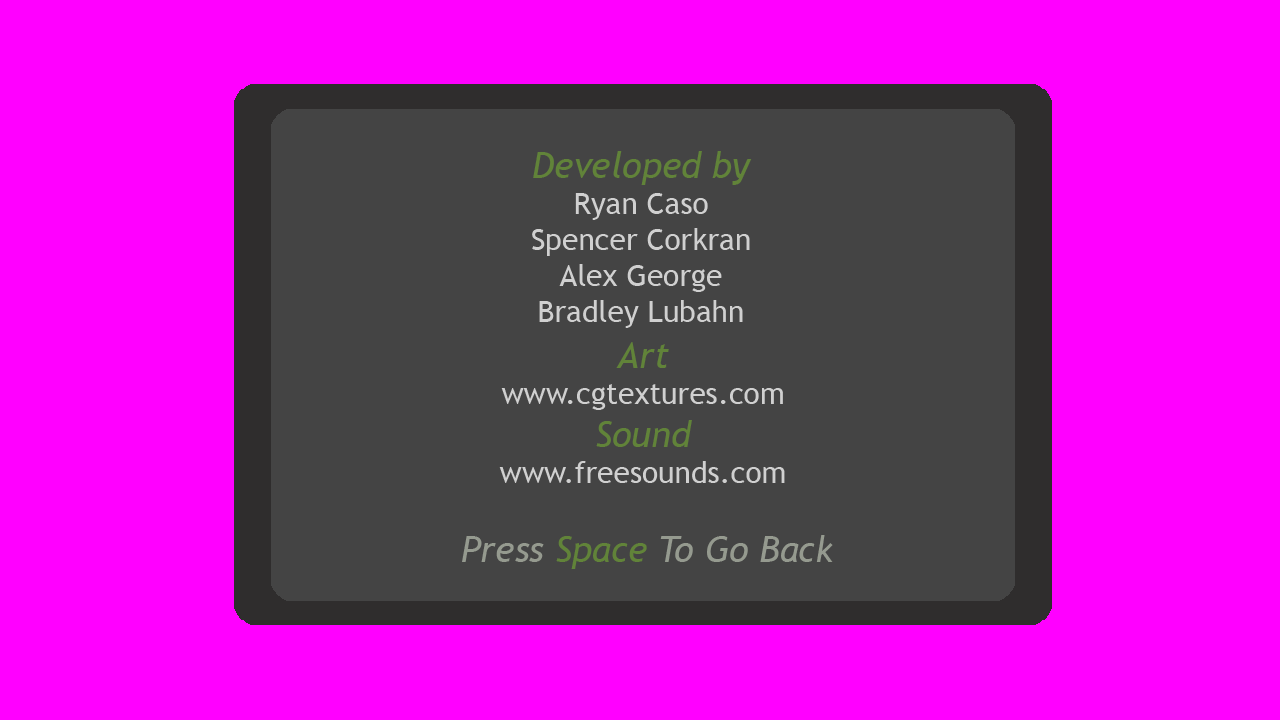
<style>
.page{position:relative;width:1280px;height:720px;background:#ff00ff}
.page>*{position:absolute;margin:0}
.t1{font:30px "TrebuchetMS";color:#d0d0d0}
.t2{font:36px "TrebuchetMS-Italic";color:#618339}
.t3{font:36px "TrebuchetMS-Italic";color:#959a8f}
</style>
<div class="page">
<p class="t1" style="left:532px;top:151px;width:220px;height:177px;text-align:center"><span class="t2">Developed by<br></span>Ryan Caso<br>Spencer Corkran<br>Alex George<br>Bradley Lubahn</p>
<p class="t1" style="left:499px;top:342px;width:286px;height:141px;text-align:center"><span class="t2">Art<br></span>www.cgtextures.com<br><span class="t2">Sound<br></span>www.freesounds.com</p>
<p class="t3" style="left:462px;top:535px;width:371px;height:34px">Press<span class="t2"> Space </span>To Go Back</p>
</div>
